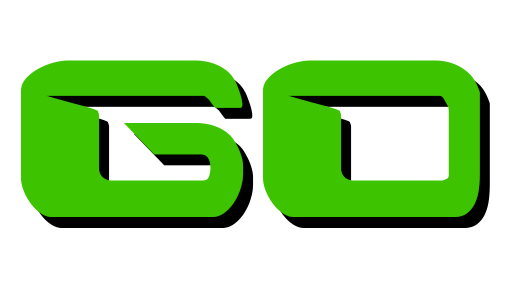
<style>
.page{position:relative;width:510px;height:300px;background:#ffffff}
.page>*{position:absolute;margin:0}
.t1{font:250px "Interdiction";color:#3ec300}
</style>
<div class="page">
<p class="t1" style="left:21px;top:60px;width:459px;height:157px">Go</p>
<p class="t1" style="left:31px;top:71px;width:459px;height:157px">Go</p>
</div>
